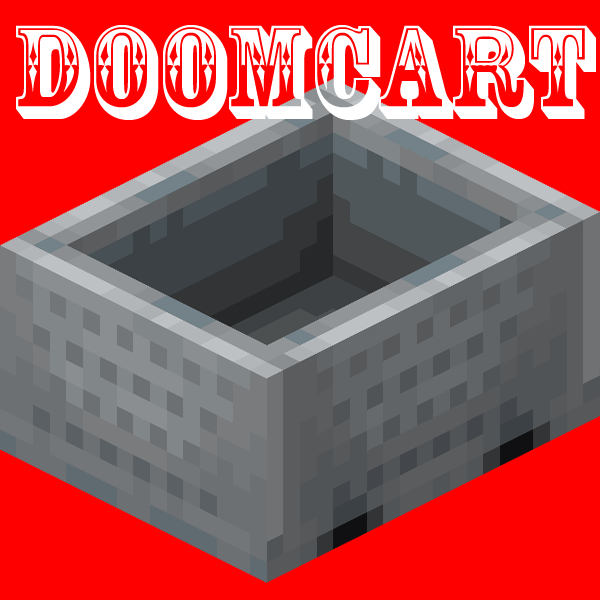
<style>
.page{position:relative;width:600px;height:600px;background:#ff0000}
.page>*{position:absolute;margin:0}
.t1{font:123.2px "RosewoodStd-Regular";color:#ffffff}
</style>
<div class="page">
<p class="t1" style="left:16px;top:25px;width:580px;height:95px">DOOMCART</p>
</div>
